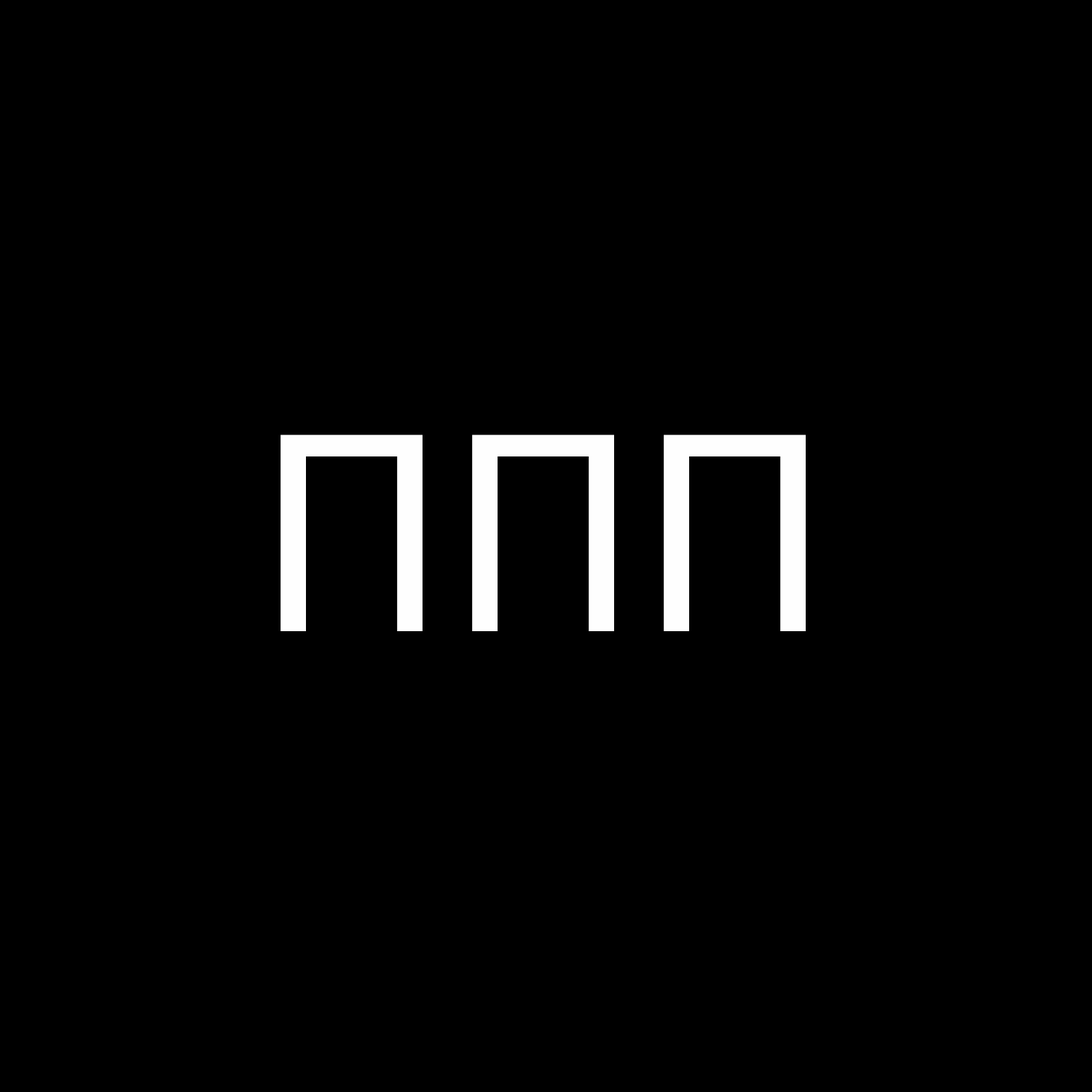
<style>
.page{position:relative;width:1092px;height:1092px;background:#000000}
.page>*{position:absolute;margin:0}
.t1{font:291px "MyriadPro-Regular";letter-spacing:0.02em;color:#fefefe}
</style>
<div class="page">
<p class="t1" style="left:280px;top:435px;width:525px;height:196px">ППП</p>
</div>
